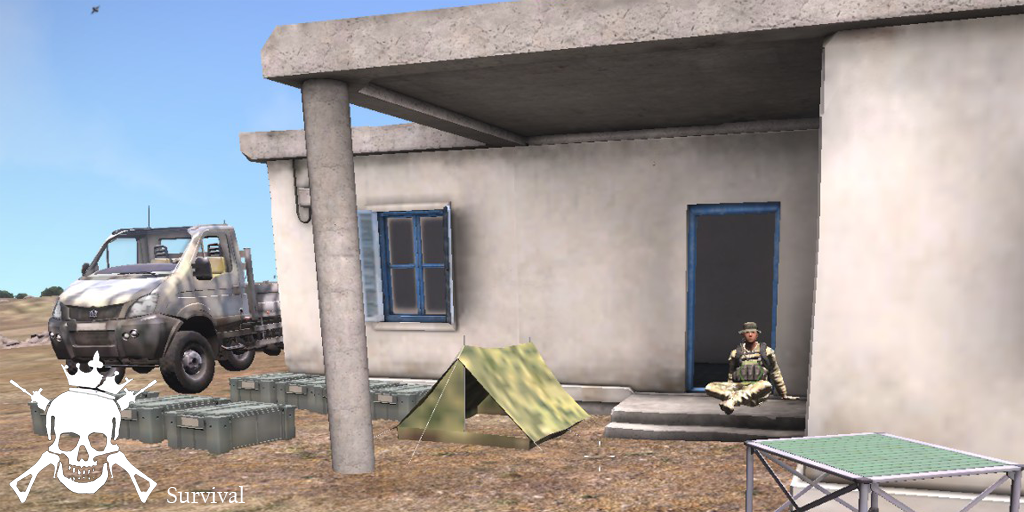
<style>
.page{position:relative;width:1024px;height:512px}
.page>*{position:absolute;margin:0}
.t1{font:24px "CalifornianFB-Reg";color:#ffffff}
</style>
<div class="page">
<p class="t1" style="left:167px;top:486px;width:78px;height:17px">Survival</p>
</div>
